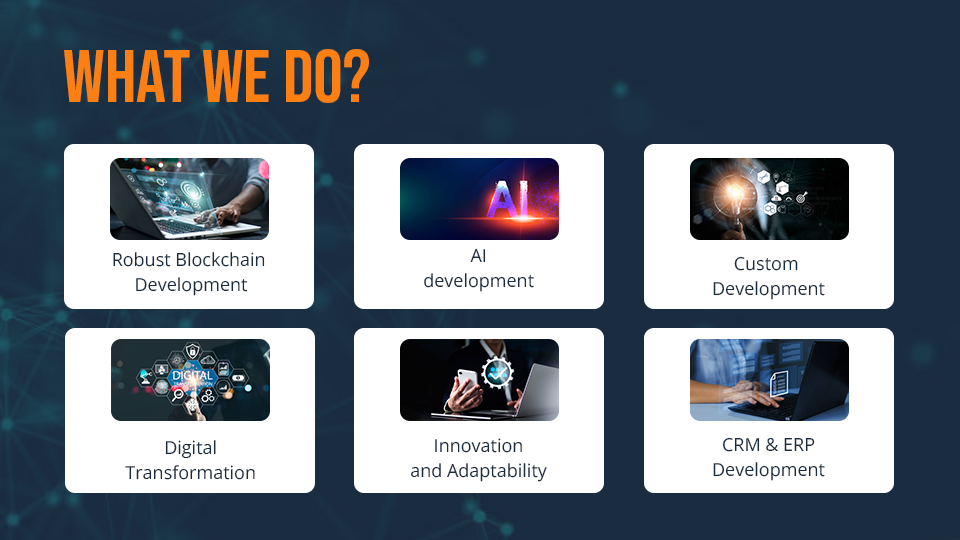
<style>
.page{position:relative;width:960px;height:540px;background:#ffffff}
.page>*{position:absolute;margin:0}
.t1{font:74.3px "BebasNeue-Regular";color:#fb7f12}
.t2{font:18px/25px "OpenSans-Regular";color:#1a2c40}
</style>
<div class="page">
<p class="t1" style="left:64px;top:49px;width:305px;height:54px">WHAT WE DO?</p>
<p class="t2" style="left:113px;top:252px;width:152px;height:44px;text-align:center">Robust Blockchain <br>Development</p>
<p class="t2" style="left:424px;top:249px;width:110px;height:43px;text-align:center">AI <br>development</p>
<p class="t2" style="left:713px;top:256px;width:112px;height:44px;text-align:center">Custom <br>Development</p>
<p class="t2" style="left:411px;top:438px;width:136px;height:44px;text-align:center">Innovation <br>and Adaptability</p>
<p class="t2" style="left:713px;top:437px;width:112px;height:44px;text-align:center">CRM &amp; ERP<br> Development</p>
<p class="t2" style="left:125px;top:440px;width:130px;height:40px;text-align:center">Digital <br>Transformation</p>
</div>
